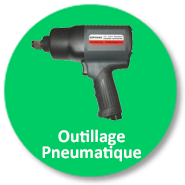
<style>
.page{position:relative;width:185px;height:185px;background:#00cc66}
.page>*{position:absolute;margin:0}
.t1{font:18px/16px "Calibri-Bold";color:#ffffff}
</style>
<div class="page">
<p class="t1" style="left:42px;top:129px;width:99px;height:33px;text-align:center">Outillage   <br>Pneumatique</p>
</div>
